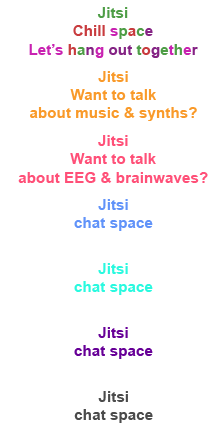
<style>
.page{position:relative;width:224px;height:448px;background:#ffffff}
.page>*{position:absolute;margin:0}
.t1{font:15.3px "Arial-BoldMT";color:#4e9d46}
.t2{font:15.3px "Arial-BoldMT";color:#c83b3e}
.t3{font:15.3px "Arial-BoldMT";color:#c822b1}
.t4{font:15.3px "Arial-BoldMT";color:#842384}
.t5{font:15.3px "Arial-BoldMT";color:#f99a2a}
.t6{font:15.3px "Arial-BoldMT";color:#ff5078}
.t7{font:15.3px "Arial-BoldMT";color:#6193f9}
.t8{font:15.3px "Arial-BoldMT";color:#2af9df}
.t9{font:15.3px "Arial-BoldMT";color:#670097}
.t10{font:15.3px "Arial-BoldMT";color:#4b4b4b}
</style>
<div class="page">
<p class="t1" style="left:29px;top:7px;width:169px;height:51px;text-align:center">Jitsi<br><span class="t2">Chill </span><span class="t3">s</span>p<span class="t2">a</span>c<span class="t4">e<br></span><span class="t3">Let’s </span><span class="t2">h</span>a<span class="t4">n</span><span class="t3">g </span><span class="t4">out</span> t<span class="t2">o</span><span class="t4">g</span>e<span class="t3">t</span>h<span class="t3">e</span><span class="t4">r</span></p>
<p class="t5" style="left:30px;top:71px;width:167px;height:50px;text-align:center">Jitsi<br>Want to talk<br>about music &amp; synths?</p>
<p class="t6" style="left:18px;top:135px;width:190px;height:48px;text-align:center">Jitsi<br>Want to talk<br>about EEG &amp; brainwaves?</p>
<p class="t7" style="left:74px;top:199px;width:79px;height:32px;text-align:center">Jitsi<br>chat space</p>
<p class="t8" style="left:74px;top:263px;width:79px;height:32px;text-align:center">Jitsi<br>chat space</p>
<p class="t9" style="left:74px;top:327px;width:79px;height:32px;text-align:center">Jitsi<br>chat space</p>
<p class="t10" style="left:74px;top:391px;width:79px;height:32px;text-align:center">Jitsi<br>chat space</p>
</div>
